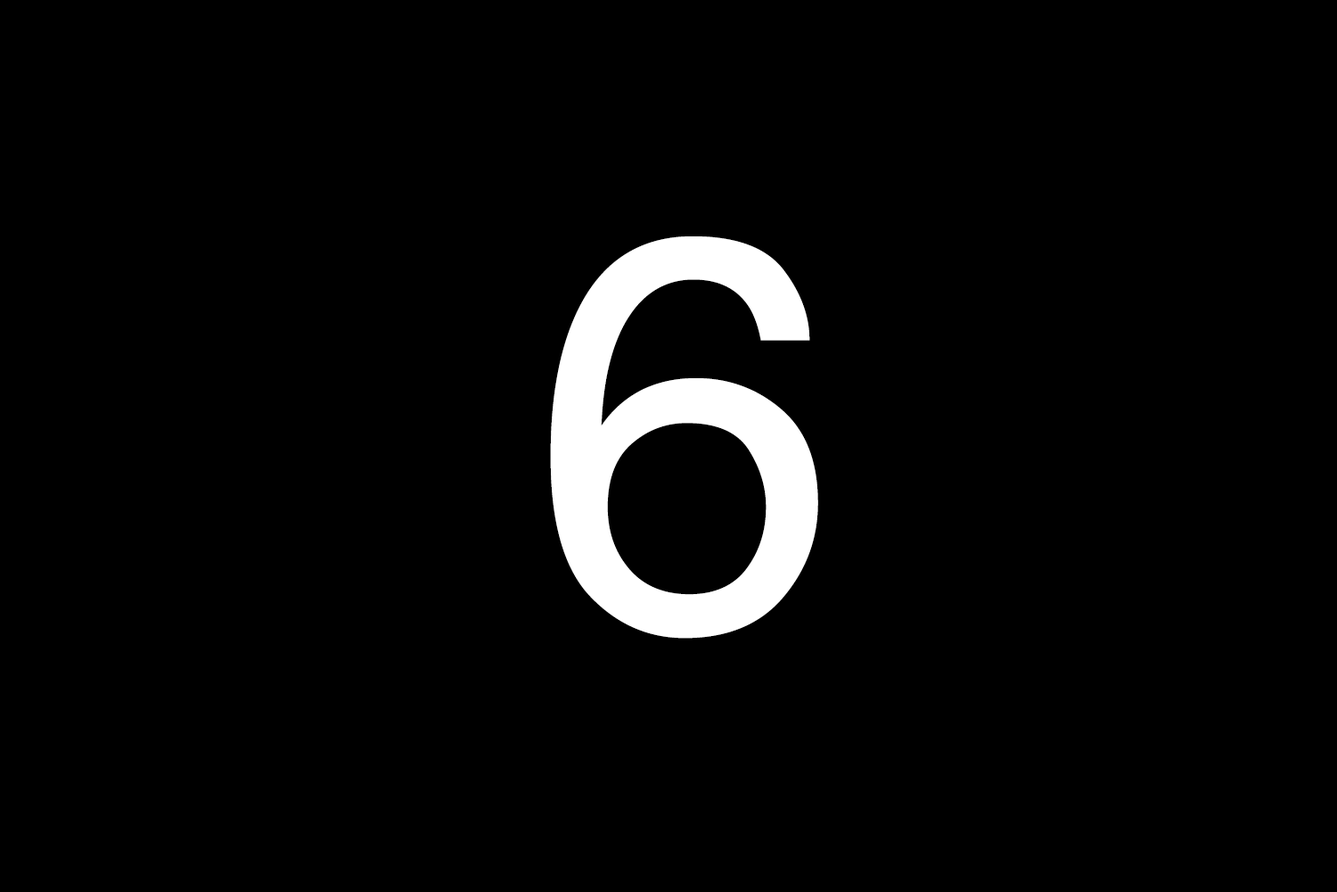
<style>
.page{position:relative;width:1337px;height:892px;background:#000000}
.page>*{position:absolute;margin:0}
.t1{font:557.3px "Helvetica";letter-spacing:0.05em;color:#ffffff}
</style>
<div class="page">
<p class="t1" style="left:550px;top:236px;width:268px;height:402px">6</p>
</div>
